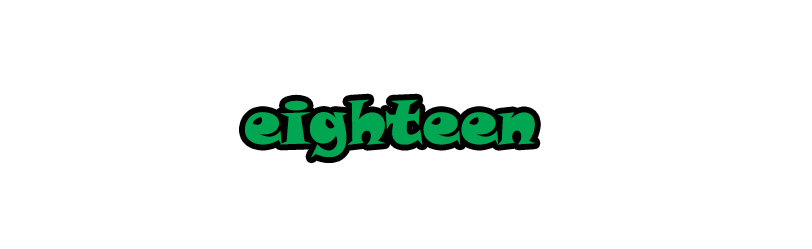
<style>
.page{position:relative;width:812px;height:249px;background:#ffffff}
.page>*{position:absolute;margin:0}
.t1{font:60px "SnapITC-Regular";color:#00a651}
</style>
<div class="page">
<p class="t1" style="left:245px;top:99px;width:290px;height:59px">eighteen</p>
</div>
